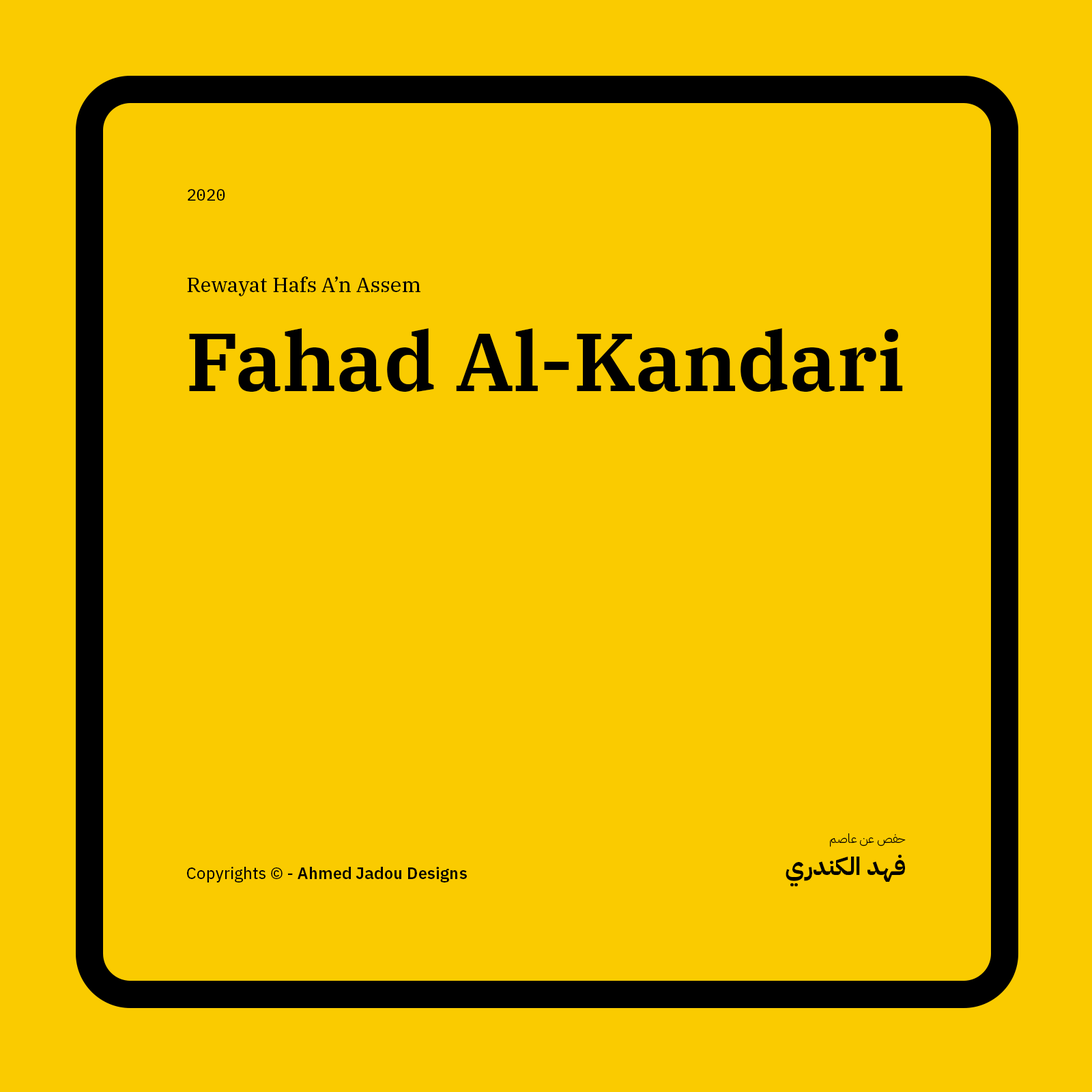
<style>
.page{position:relative;width:1092px;height:1092px;background:#facb00}
.page>*{position:absolute;margin:0}
.t1{font:16.4px "IBMPlexMono-Text";color:#000000}
.t2{font:20.5px "IBMPlexSerif-Text";color:#000000}
.t3{font:81.9px "IBMPlexSerif-SemiBold";color:#000000}
.t4{font:12.3px "IBMPlexArabic-Light";color:#000000}
.t5{font:24.6px "IBMPlexArabic-Bold";color:#000000}
.t6{font:16.4px "IBMPlexSans-SemiBold";color:#000000}
.t7{font:16.4px "IBMPlexSans-Text";color:#000000}
</style>
<div class="page">
<p class="t1" style="left:188px;top:189px;width:37px;height:12px">2020</p>
<p class="t2" style="left:187px;top:276px;width:233px;height:20px">Rewayat Hafs A’n Assem</p>
<p class="t3" style="left:189px;top:328px;width:714px;height:64px">Fahad Al-Kandari</p>
<p class="t4" style="left:830px;top:833px;width:76px;height:14px">حفص عن عاصم</p>
<p class="t5" style="left:786px;top:854px;width:119px;height:33px">فهد الكندري</p>
<p class="t6" style="left:187px;top:867px;width:280px;height:15px"><span class="t7">Copyrights © - </span>Ahmed Jadou Designs</p>
</div>
